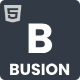
<style>
.page{position:relative;width:80px;height:80px;background:#323a46}
.page>*{position:absolute;margin:0}
.t1{font:42px "Poppins-Bold";color:#ffffff}
.t2{font:16px "Poppins-Bold";color:#ffffff}
</style>
<div class="page">
<p class="t1" style="left:28px;top:23px;width:25px;height:30px">B</p>
<p class="t2" style="left:10px;top:63px;width:60px;height:13px">BUSION</p>
</div>
